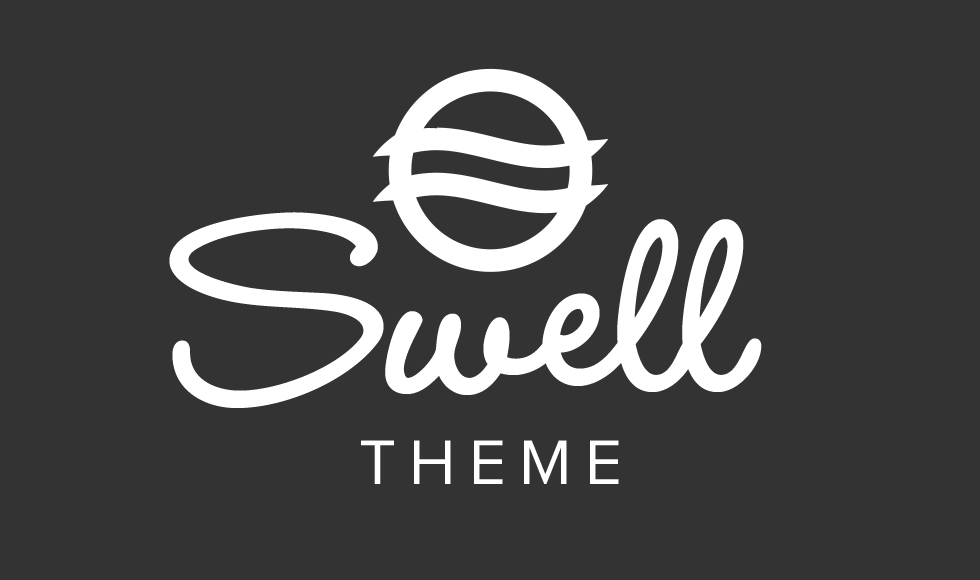
<style>
.page{position:relative;width:980px;height:580px;background:#333333}
.page>*{position:absolute;margin:0}
.t1{font:326.3px "WendyLP-Bold";color:#ffffff}
.t2{font:65.3px "ProximaNova-Regular";letter-spacing:0.2em;color:#ffffff;text-transform:uppercase}
</style>
<div class="page">
<p class="t1" style="left:169px;top:212px;width:593px;height:196px">Swell</p>
<p class="t2" style="left:361px;top:440px;width:258px;height:44px">Theme</p>
</div>
